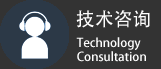
<style>
.page{position:relative;width:161px;height:69px;background:#333333}
.page>*{position:absolute;margin:0}
.t1{font:18.9px "AdobeHeitiStd-Regular";color:#fefefe}
.t2{font:12px/14px "AdobeHeitiStd-Regular";color:#fefefe}
</style>
<div class="page">
<p class="t1" style="left:76px;top:10px;width:74px;height:18px">技术咨询</p>
<p class="t2" style="left:76px;top:37px;width:70px;height:25px">Technology<br>Consultation</p>
</div>
